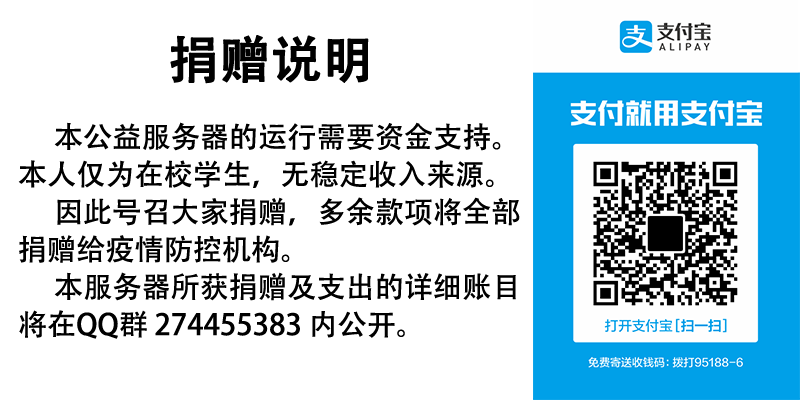
<style>
.page{position:relative;width:800px;height:400px;background:#ffffff}
.page>*{position:absolute;margin:0}
.t1{font:50px "AdobeHeitiStd-Regular";color:#000000;font-weight:bold}
.t2{font:29.2px/37.5px "AdobeHeitiStd-Regular";color:#000000}
</style>
<div class="page">
<p class="t1" style="left:170px;top:35px;width:199px;height:49px">捐赠说明</p>
<p class="t2" style="left:18px;top:122px;width:502px;height:217px">本公益服务器的运行需要资金支持。<br>本人仅为在校学生，无稳定收入来源。<br> 因此号召大家捐赠，多余款项将全部<br>捐赠给疫情防控机构。<br> 本服务器所获捐赠及支出的详细账目<br>将在QQ群 274455383 内公开。</p>
</div>
